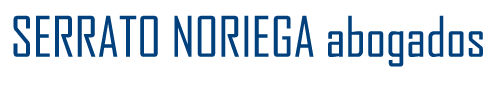
<style>
.page{position:relative;width:500px;height:85px;background:#ffffff}
.page>*{position:absolute;margin:0}
.t1{font:53.3px "AgencyFB-Reg";color:#00407d}
</style>
<div class="page">
<p class="t1" style="left:13px;top:15px;width:470px;height:52px">SERRATO NORIEGA abogados</p>
</div>
